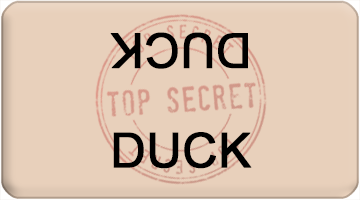
<style>
.page{position:relative;width:360px;height:200px;background:#e8d0bb}
.page>*{position:absolute;margin:0}
.t1{font:48px "ArialMT";color:#000000;font-weight:bold}
</style>
<div class="page">
<p class="t1" style="left:110px;top:32px;width:138px;height:37px;rotate:180deg">DUCK</p>
<p class="t1" style="left:113px;top:132px;width:139px;height:37px">DUCK</p>
</div>
